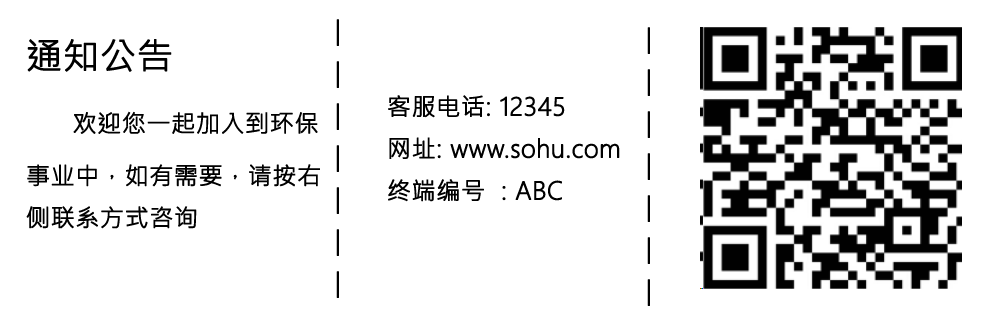
<style>
.page{position:relative;width:1000px;height:320px;background:#ffffff}
.page>*{position:absolute;margin:0}
.t1{font:24px "MicrosoftJhengHeiLight";color:#000000;font-weight:bold}
.t2{font:36px "MicrosoftJhengHeiLight";color:#000000;font-weight:bold}
</style>
<div class="page">
<p class="t1" style="left:336px;top:19px;width:3px;height:279px">|<br>|<br>|<br>|<br>|<br>|<br>|</p>
<p class="t1" style="left:647px;top:27px;width:3px;height:279px">|<br>|<br>|<br>|<br>|<br>|<br>|</p>
<p class="t1" style="left:26px;top:39px;width:294px;height:190px"><span class="t2">通知公告<br>    </span>欢迎您一起加入到环保事业中，如有需要，请按右侧联系方式咨询</p>
<p class="t1" style="left:388px;top:95px;width:232px;height:107px">客服电话: 12345<br>网址: www.sohu.com<br>终端编号  : ABC</p>
</div>
